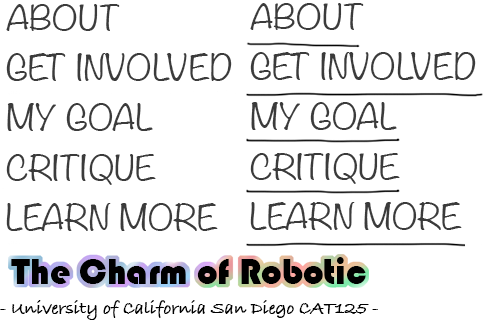
<style>
.page{position:relative;width:488px;height:320px;background:#ffffff}
.page>*{position:absolute;margin:0}
.t1{font:30.8px "Noteworthy-Light";color:#3b3b3b;scale:1.17 1}
.t2{font:30.8px "Noteworthy-Light";color:#3b3b3b;scale:1.18 1}
.t3{font:36.7px "Bauhaus93";color:#000000}
.t4{font:18.3px "BradleyHandITCTTBold";color:#000000}
</style>
<div class="page">
<p class="t1" style="left:6px;top:4px;width:114px;height:27px">ABOUT</p>
<p class="t1" style="left:250px;top:3px;width:114px;height:27px">ABOUT</p>
<p class="t1" style="left:6px;top:53px;width:226px;height:28px">GET INVOLVED</p>
<p class="t1" style="left:250px;top:52px;width:226px;height:28px">GET INVOLVED</p>
<p class="t1" style="left:251px;top:102px;width:146px;height:28px">MY GOAL</p>
<p class="t1" style="left:7px;top:103px;width:146px;height:28px">MY GOAL</p>
<p class="t2" style="left:6px;top:154px;width:150px;height:31px">CRITIQUE</p>
<p class="t2" style="left:250px;top:153px;width:150px;height:31px">CRITIQUE</p>
<p class="t1" style="left:6px;top:203px;width:212px;height:28px">LEARN MORE</p>
<p class="t1" style="left:250px;top:202px;width:212px;height:28px">LEARN MORE</p>
<p class="t3" style="left:11px;top:257px;width:355px;height:27px">The Charm of Robotic</p>
<p class="t4" style="left:0px;top:300px;width:378px;height:20px">- University of California San Diego CAT125 -</p>
</div>
